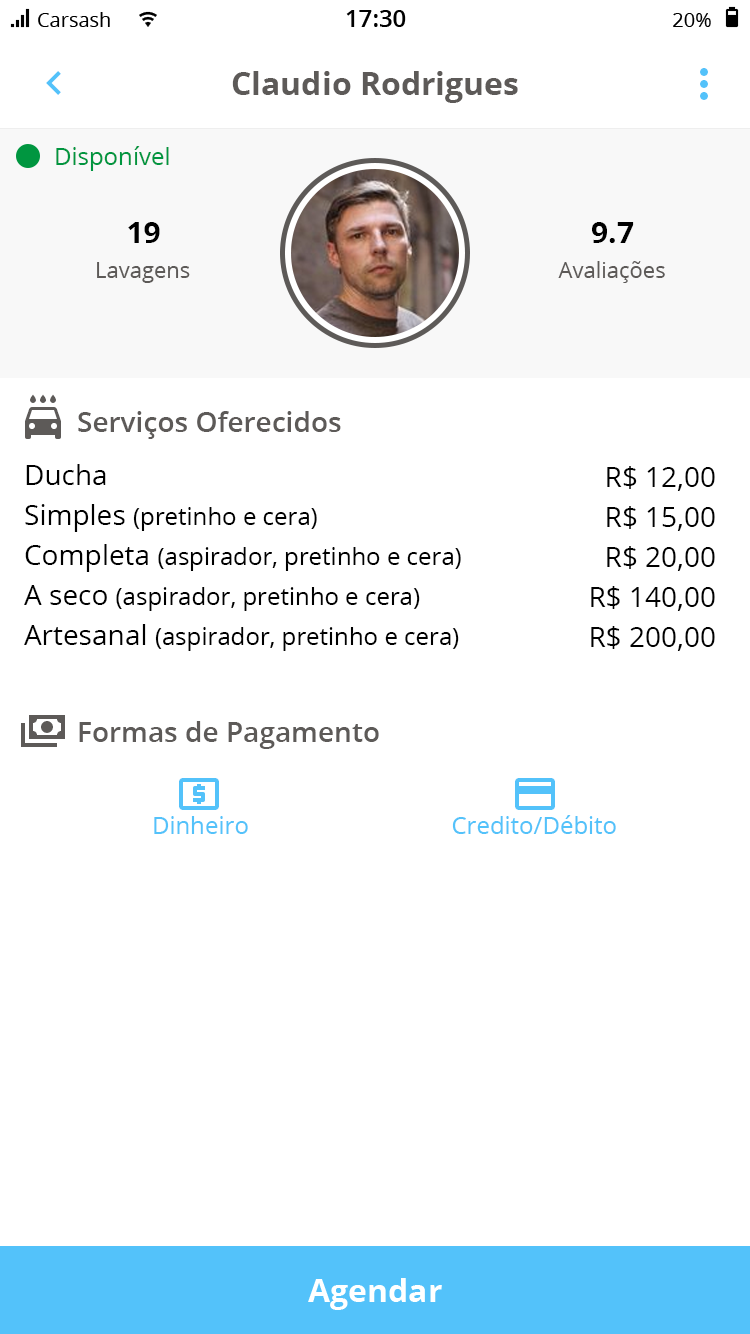
<style>
.page{position:relative;width:750px;height:1334px;background:#ffffff}
.page>*{position:absolute;margin:0}
.t1{font:32px "OpenSans-Bold";color:#5d5a58}
.t2{font:24px "OpenSans";color:#009640}
.t3{font:30px "OpenSans-Bold";color:#000000}
.t4{font:22px "OpenSans";color:#5d5a58}
.t5{font:28px "OpenSans-Semibold";color:#5d5a58}
.t6{font:28px "OpenSans";color:#000000}
.t7{font:24px "OpenSans";color:#000000}
.t8{font:24px "OpenSans";color:#53c2fa}
</style>
<div class="page">
<p class="t1" style="left:232px;top:71px;width:286px;height:32px">Claudio Rodrigues</p>
<p class="t2" style="left:56px;top:146px;width:113px;height:25px">Disponível</p>
<p class="t3" style="left:128px;top:222px;width:32px;height:21px">19</p>
<p class="t3" style="left:592px;top:222px;width:42px;height:21px">9.7</p>
<p class="t4" style="left:97px;top:262px;width:93px;height:21px">Lavagens</p>
<p class="t4" style="left:558px;top:261px;width:107px;height:22px">Avaliações</p>
<p class="t5" style="left:78px;top:411px;width:263px;height:28px">Serviços Oferecidos</p>
<p class="t6" style="left:26px;top:464px;width:80px;height:21px">Ducha</p>
<p class="t6" style="left:607px;top:466px;width:108px;height:25px">R$ 12,00</p>
<p class="t7" style="left:25px;top:504px;width:292px;height:28px"><span class="t6">Simples </span>(pretinho e cera)</p>
<p class="t6" style="left:607px;top:506px;width:108px;height:25px">R$ 15,00</p>
<p class="t7" style="left:25px;top:544px;width:436px;height:28px"><span class="t6">Completa </span>(aspirador, pretinho e cera)</p>
<p class="t6" style="left:607px;top:546px;width:108px;height:25px">R$ 20,00</p>
<p class="t7" style="left:24px;top:585px;width:396px;height:26px"><span class="t6">A seco </span>(aspirador, pretinho e cera)</p>
<p class="t6" style="left:591px;top:586px;width:124px;height:25px">R$ 140,00</p>
<p class="t7" style="left:24px;top:624px;width:435px;height:27px"><span class="t6">Artesanal </span>(aspirador, pretinho e cera)</p>
<p class="t6" style="left:591px;top:626px;width:124px;height:25px">R$ 200,00</p>
<p class="t5" style="left:79px;top:721px;width:300px;height:28px">Formas de Pagamento</p>
<p class="t8" style="left:154px;top:816px;width:94px;height:18px">Dinheiro</p>
<p class="t8" style="left:452px;top:815px;width:164px;height:19px">Credito/Débito</p>
</div>
